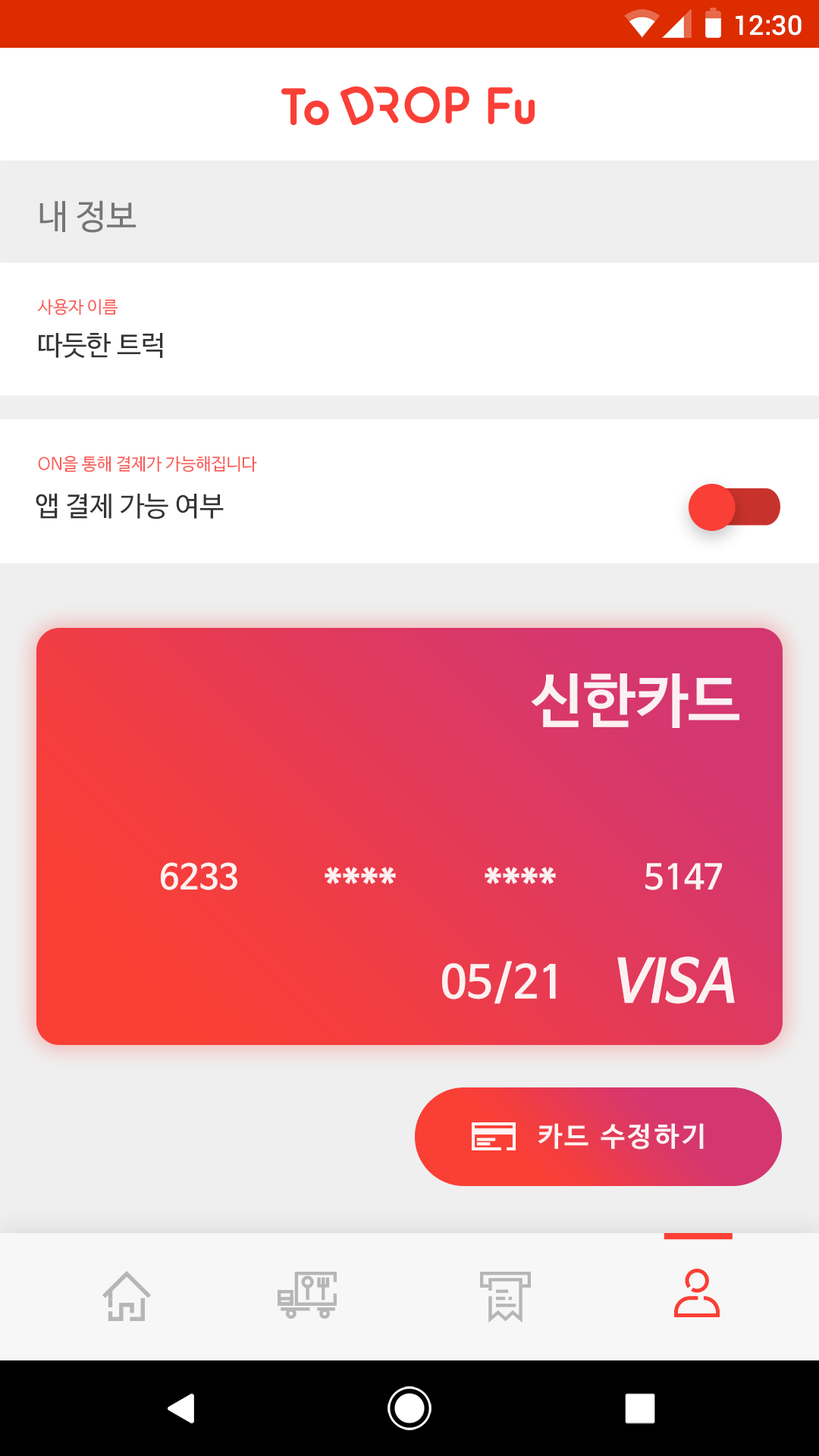
<style>
.page{position:relative;width:819px;height:1456px;background:#ffffff}
.page>*{position:absolute;margin:0}
.t1{font:27.3px "Roboto-Medium";color:#ffffff}
.t2{font:34.1px "NanumBarunGothic";color:#656565}
.t3{font:17.1px "NanumBarunGothic";color:#fa5b56}
.t4{font:27.3px "NanumBarunGothic";color:#343434}
.t5{font:58.9px "NanumBarunGothicBold";color:#ffffff}
.t6{font:34.1px "NanumBarunGothicBold";color:#ffffff}
.t7{font:40.9px "NanumBarunGothicBold";color:#ffffff}
.t8{font:44.7px "NanumBarunGothicBold";color:#ffffff}
.t9{font:58.9px "NanumBarunGothicBold";color:#ffffff;font-style:italic}
.t10{font:27.3px "NanumBarunGothicBold";letter-spacing:0.1em;color:#ffffff}
</style>
<div class="page">
<p class="t1" style="left:736px;top:15px;width:66px;height:21px">12:30</p>
<p class="t2" style="left:39px;top:200px;width:97px;height:33px;opacity:0.9">내 정보</p>
<p class="t3" style="left:37px;top:299px;width:81px;height:16px">사용자 이름</p>
<p class="t4" style="left:39px;top:333px;width:124px;height:25px">따듯한 트럭</p>
<p class="t3" style="left:38px;top:456px;width:219px;height:16px">ON을 통해 결제가 가능해집니다</p>
<p class="t4" style="left:36px;top:493px;width:188px;height:26px">앱 결제 가능 여부</p>
<p class="t5" style="left:531px;top:673px;width:208px;height:55px;opacity:0.9">신한카드</p>
<p class="t6" style="left:161px;top:862px;width:76px;height:28px;opacity:0.9">6233</p>
<p class="t7" style="left:325px;top:867px;width:71px;height:17px;opacity:0.9">****</p>
<p class="t7" style="left:485px;top:867px;width:71px;height:17px;opacity:0.9">****</p>
<p class="t6" style="left:645px;top:863px;width:77px;height:27px;opacity:0.9">5147</p>
<p class="t8" style="left:442px;top:961px;width:114px;height:43px;opacity:0.9">05/21</p>
<p class="t9" style="left:617px;top:956px;width:118px;height:48px;opacity:0.9">VISA</p>
<p class="t10" style="left:538px;top:1123px;width:166px;height:27px;opacity:0.9">카드 수정하기</p>
</div>
